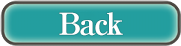
<style>
.page{position:relative;width:181px;height:46px;background:#239e9f}
.page>*{position:absolute;margin:0}
.t1{font:30px "RyuminPro-ExBold";letter-spacing:-0.08em;color:#ffffff}
</style>
<div class="page">
<p class="t1" style="left:59px;top:12px;width:64px;height:24px">Back</p>
</div>
